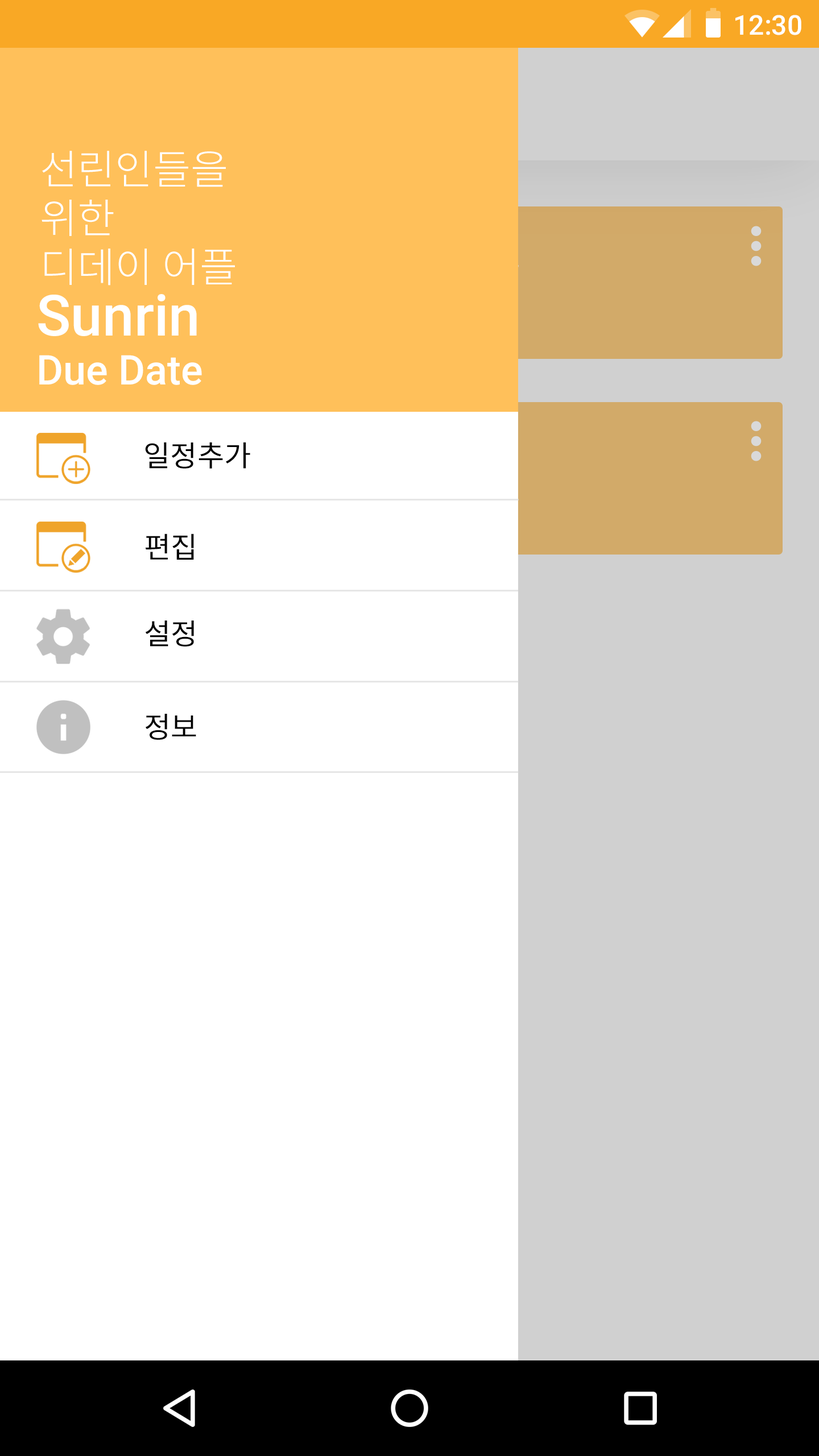
<style>
.page{position:relative;width:819px;height:1456px;background:#ffffff}
.page>*{position:absolute;margin:0}
.t1{font:27.3px "Roboto-Medium";color:#ffffff}
.t2{font:40.9px "NotoSansCJKkr-Light";color:#ffffff}
.t3{font:40.9px/10.2px "NotoSansCJKkr-Light";color:#ffffff}
.t4{font:40.9px "Roboto-Medium";color:#ffffff}
.t5{font:56.9px/10.2px "Roboto-Medium";color:#ffffff}
.t6{font:29.2px "NotoSansCJKkr-Regular";color:#000000}
</style>
<div class="page">
<p class="t1" style="left:735px;top:15px;width:66px;height:20px">12:30</p>
<p class="t2" style="left:42px;top:151px;width:193px;height:135px"><span class="t3">선린인들을</span><br>위한<br>디데이 어플</p>
<p class="t4" style="left:38px;top:294px;width:164px;height:91px"><span class="t5">Sunrin<br></span>Due Date</p>
<p class="t6" style="left:145px;top:442px;width:105px;height:27px">일정추가</p>
<p class="t6" style="left:146px;top:533px;width:48px;height:27px">편집</p>
<p class="t6" style="left:145px;top:620px;width:49px;height:27px">설정</p>
<p class="t6" style="left:146px;top:714px;width:50px;height:26px">정보</p>
</div>
